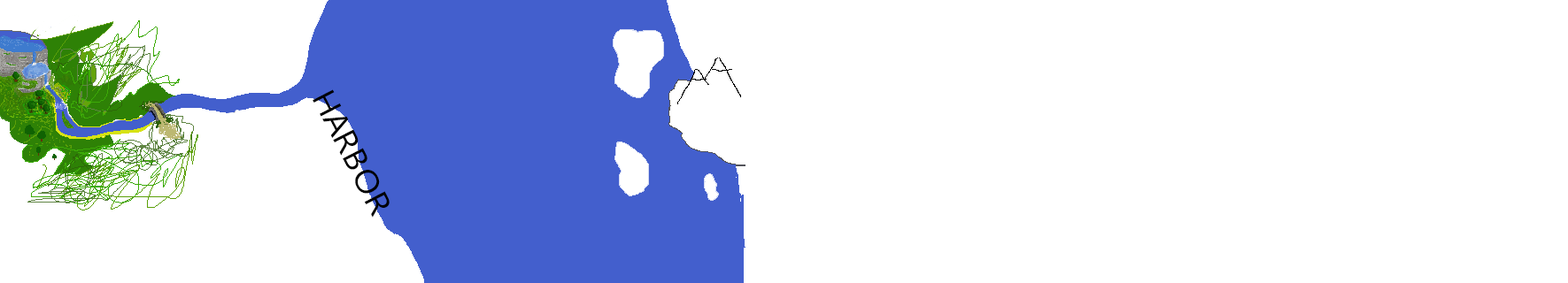
<style>
.page{position:relative;width:1568px;height:283px;background:#ffffff}
.page>*{position:absolute;margin:0}
.t1{font:32.3px "SegoeUI";color:#000000;scale:1.07 1}
</style>
<div class="page">
<p class="t1" style="left:313px;top:89px;width:77px;height:129px;rotate:63deg">HARBOR</p>
</div>
